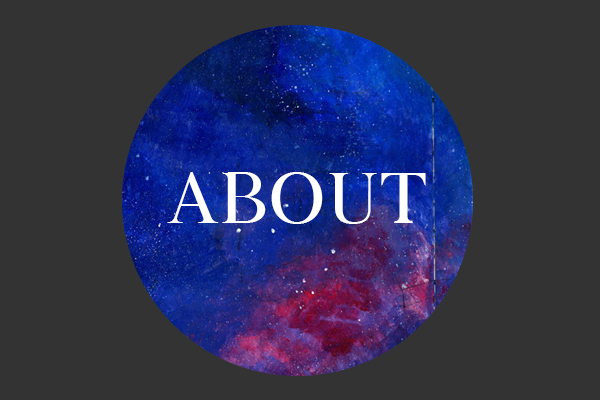
<style>
.page{position:relative;width:600px;height:400px;background:#333333}
.page>*{position:absolute;margin:0}
.t1{font:80px "Novar";color:#ffffff}
</style>
<div class="page">
<p class="t1" style="left:167px;top:172px;width:259px;height:52px">ABOUT</p>
</div>
